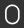
<style>
.page{position:relative;width:24px;height:28px;background:#333333}
.page>*{position:absolute;margin:0}
.t1{font:27.3px "NexaLight";color:#ffffff}
</style>
<div class="page">
<p class="t1" style="left:5px;top:4px;width:15px;height:21px">0</p>
</div>
